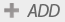
<style>
.page{position:relative;width:65px;height:22px;background:#ededed}
.page>*{position:absolute;margin:0}
.t1{font:18px "MyriadPro-It";letter-spacing:-0.05em;color:#666666;text-transform:uppercase}
</style>
<div class="page">
<p class="t1" style="left:27px;top:4px;width:33px;height:13px">Add</p>
</div>
